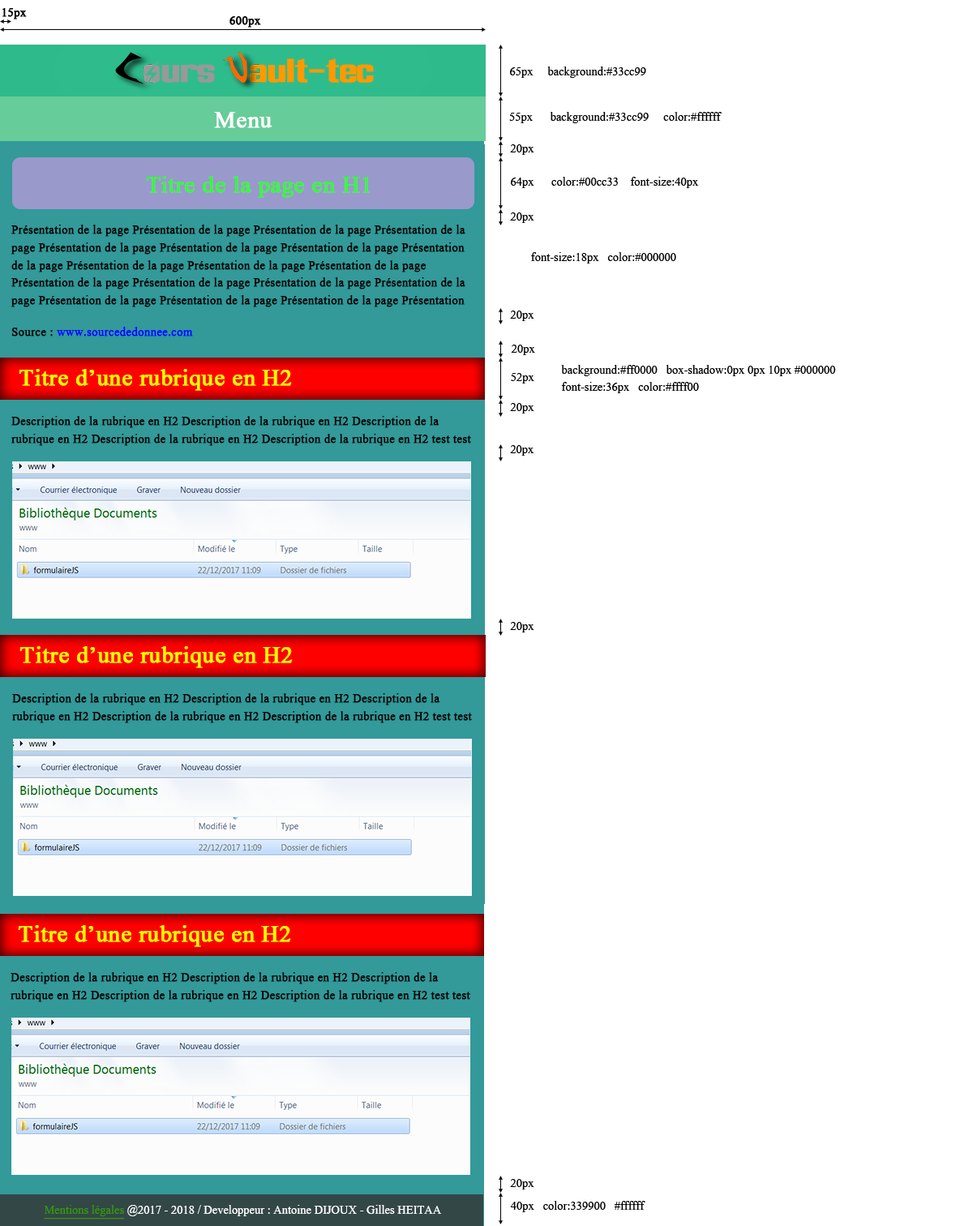
<style>
.page{position:relative;width:973px;height:1226px;background:#ffffff}
.page>*{position:absolute;margin:0}
.t1{font:14.6px "Aparajita";color:#000000;font-weight:bold}
.t2{font:14.6px "Aparajita";color:#000000}
.t3{font:29.2px "Aparajita";color:#ffffff;font-weight:bold}
.t4{font:29.2px "Aparajita";color:#33ff33;font-weight:bold}
.t5{font:14.6px "Aparajita";color:#0000ff;font-weight:bold}
.t6{font:29.2px "Aparajita";color:#ffff00;font-weight:bold}
.t7{font:14.6px "Aparajita";color:#ffffff}
.t8{font:14.6px "Aparajita";color:#339900;text-decoration:underline}
</style>
<div class="page">
<p class="t1" style="left:2px;top:8px;width:25px;height:11px">15px</p>
<p class="t1" style="left:229px;top:16px;width:32px;height:12px">600px</p>
<p class="t2" style="left:510px;top:66px;width:136px;height:12px">65px     background:#33cc99</p>
<p class="t3" style="left:214px;top:112px;width:58px;height:16px">Menu</p>
<p class="t2" style="left:509px;top:112px;width:213px;height:11px">55px      background:#33cc99     color:#ffffff</p>
<p class="t2" style="left:510px;top:144px;width:24px;height:11px">20px</p>
<p class="t4" style="left:146px;top:176px;width:224px;height:22px">Titre de la page en H1</p>
<p class="t2" style="left:511px;top:177px;width:188px;height:11px">64px      color:#00cc33    font-size:40px</p>
<p class="t2" style="left:510px;top:212px;width:24px;height:11px">20px</p>
<p class="t1" style="left:11px;top:225px;width:454px;height:82px">Présentation de la page Présentation de la page Présentation de la page Présentation de la page Présentation de la page Présentation de la page Présentation de la page Présentation de la page Présentation de la page Présentation de la page Présentation de la page Présentation de la page Présentation de la page Présentation de la page Présentation de la page Présentation de la page Présentation de la page Présentation de la page Présentation de la page Présentation de la page Présentation de la page</p>
<p class="t2" style="left:531px;top:252px;width:145px;height:11px">font-size:18px   color:#000000</p>
<p class="t2" style="left:510px;top:310px;width:24px;height:11px">20px</p>
<p class="t5" style="left:11px;top:327px;width:182px;height:9px"><span class="t1">Source : </span>www.sourcededonnee.com</p>
<p class="t2" style="left:511px;top:345px;width:24px;height:10px">20px</p>
<p class="t2" style="left:561px;top:365px;width:275px;height:28px">background:#ff0000   box-shadow:0px 0px 10px #000000<br>font-size:36px   color:#ffff00</p>
<p class="t6" style="left:19px;top:369px;width:273px;height:22px">Titre d’une rubrique en H2</p>
<p class="t2" style="left:511px;top:373px;width:23px;height:10px">52px</p>
<p class="t2" style="left:510px;top:403px;width:24px;height:10px">20px</p>
<p class="t1" style="left:11px;top:416px;width:460px;height:30px">Description de la rubrique en H2 Description de la rubrique en H2 Description de la rubrique en H2 Description de la rubrique en H2 Description de la rubrique en H2 test test</p>
<p class="t2" style="left:510px;top:445px;width:24px;height:11px">20px</p>
<p class="t2" style="left:510px;top:622px;width:24px;height:10px">20px</p>
<p class="t6" style="left:19px;top:646px;width:274px;height:22px">Titre d’une rubrique en H2</p>
<p class="t1" style="left:12px;top:693px;width:460px;height:30px">Description de la rubrique en H2 Description de la rubrique en H2 Description de la rubrique en H2 Description de la rubrique en H2 Description de la rubrique en H2 test test</p>
<p class="t6" style="left:18px;top:925px;width:273px;height:22px">Titre d’une rubrique en H2</p>
<p class="t1" style="left:11px;top:972px;width:459px;height:30px">Description de la rubrique en H2 Description de la rubrique en H2 Description de la rubrique en H2 Description de la rubrique en H2 Description de la rubrique en H2 test test</p>
<p class="t2" style="left:510px;top:1179px;width:24px;height:10px">20px</p>
<p class="t7" style="left:44px;top:1205px;width:398px;height:14px"><span class="t8">Mentions légales</span> @2017 - 2018 / Developpeur : Antoine DIJOUX - Gilles HEITAA</p>
<p class="t2" style="left:510px;top:1201px;width:135px;height:11px">40px   color:339900   #ffffff</p>
</div>
